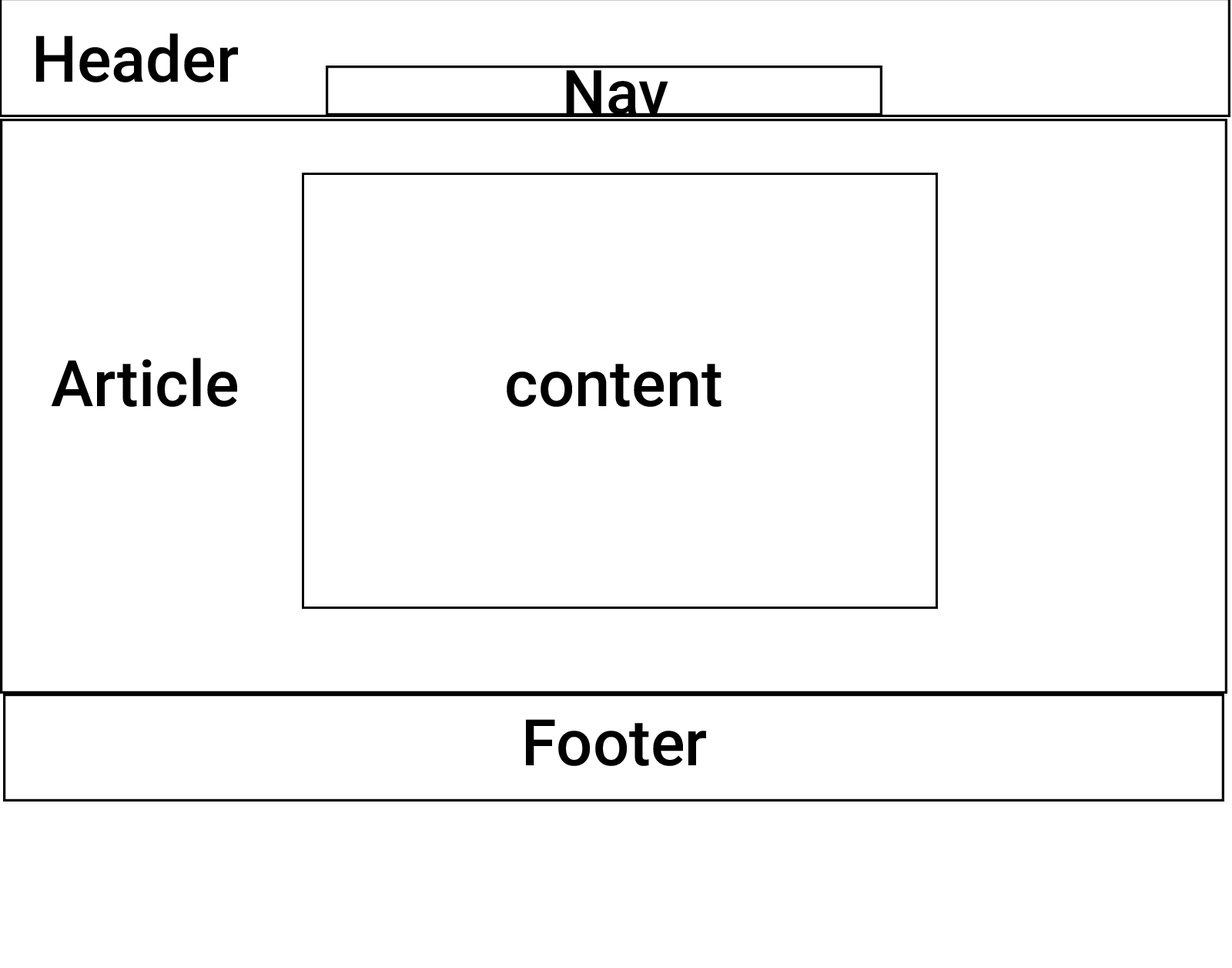
<style>
.page{position:relative;width:1232px;height:968px;background:#ffffff}
.page>*{position:absolute;margin:0}
.t1{font:64.1px "Roboto-Medium";color:#000000}
.t2{font:61.4px "Roboto-Medium";color:#000000}
</style>
<div class="page">
<p class="t1" style="left:36px;top:33px;width:203px;height:49px">Header</p>
<p class="t2" style="left:566px;top:70px;width:103px;height:45px">Nav</p>
<p class="t1" style="left:51px;top:357px;width:186px;height:50px">Article</p>
<p class="t1" style="left:507px;top:364px;width:215px;height:43px">content</p>
<p class="t1" style="left:526px;top:719px;width:181px;height:47px">Footer</p>
</div>
